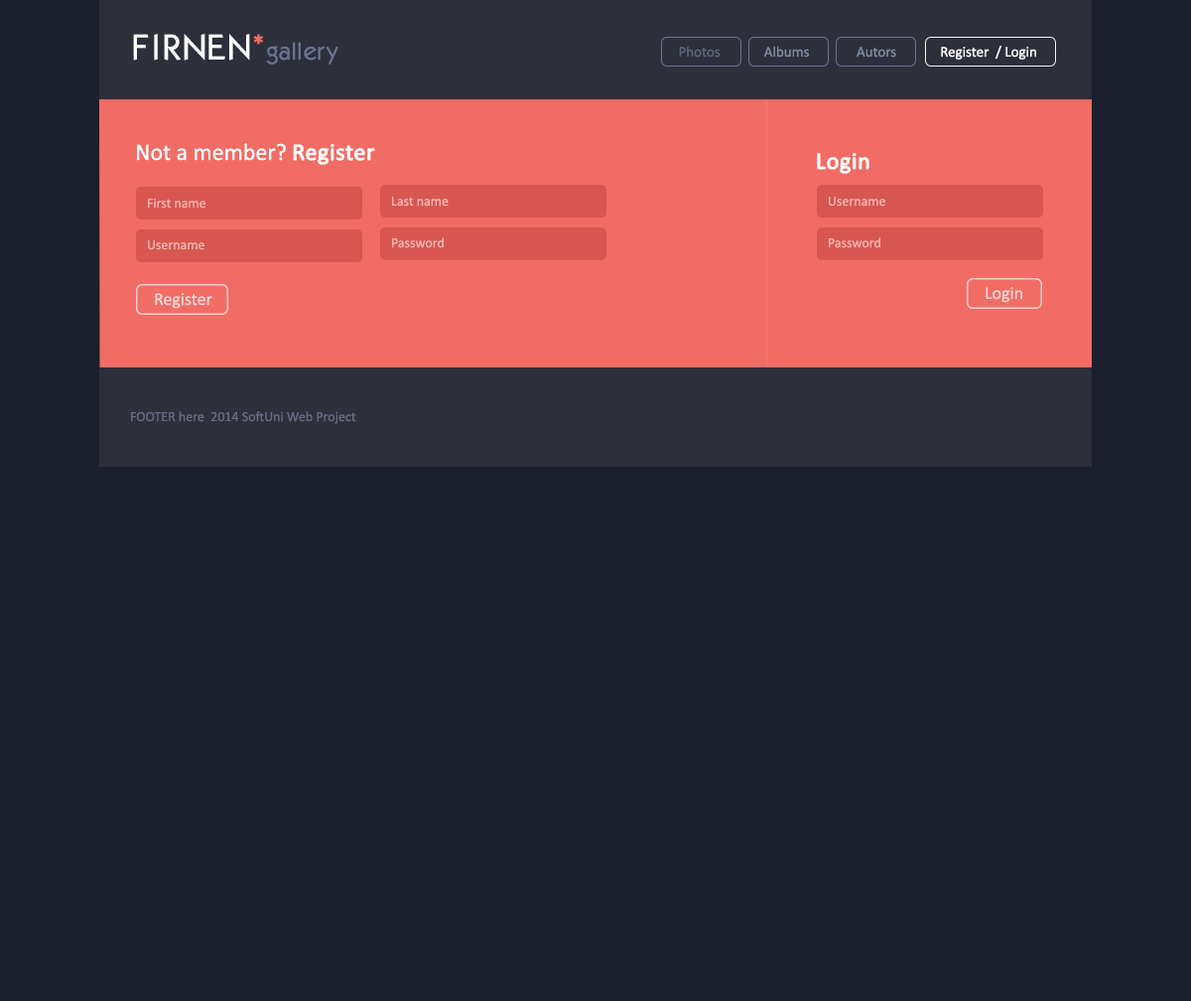
<style>
.page{position:relative;width:1191px;height:1001px;background:#1b1f2e}
.page>*{position:absolute;margin:0}
.t1{font:23.8px "Kabel";letter-spacing:0.05em;color:#6a738f}
.t2{font:35.7px "Kabel";letter-spacing:0.05em;color:#ffffff}
.t3{font:35.7px "Kabel";letter-spacing:0.075em;color:#ffffff}
.t4{font:35.7px "Kabel";letter-spacing:0.01em;color:#ffffff}
.t5{font:35.7px "Kabel";letter-spacing:0.025em;color:#ffffff}
.t6{font:35.7px "Kabel";color:#ffffff}
.t7{font:35.7px "Kabel";color:#f16c65}
.t8{font:23.8px "Kabel";color:#6a738f}
.t9{font:23.8px "Kabel";letter-spacing:-0.01em;color:#6a738f}
.t10{font:14.9px "Calibri";color:#8088a3}
.t11{font:14.9px "Calibri";color:#5d657e}
.t12{font:14.9px "Calibri";color:#ffffff}
.t13{font:23.8px "Calibri";color:#ffffff}
.t14{font:23.8px "Calibri";color:#ffffff;font-weight:bold}
.t15{font:13.9px "Calibri";color:#fab4b0}
.t16{font:17.9px "Calibri";color:#fbd8d7}
.t17{font:13.9px "Calibri";color:#676b80}
</style>
<div class="page">
<p class="t1" style="left:133px;top:34px;width:206px;height:31px"><span class="t2">F</span><span class="t3">I</span><span class="t4">R</span><span class="t5">NE</span><span class="t6">N</span><span class="t7">*</span><span class="t8">g</span>all<span class="t9">e</span><span class="t8">ry</span></p>
<p class="t10" style="left:679px;top:46px;width:358px;height:14px"><span class="t11">Photos             </span>Albums              Autors             <span class="t12">Register  / Login</span></p>
<p class="t13" style="left:137px;top:143px;width:238px;height:22px">Not a member? <span class="t14">Register</span></p>
<p class="t14" style="left:817px;top:153px;width:53px;height:21px">Login</p>
<p class="t15" style="left:148px;top:198px;width:59px;height:11px">First name</p>
<p class="t15" style="left:392px;top:197px;width:57px;height:10px">Last name</p>
<p class="t15" style="left:829px;top:197px;width:57px;height:10px">Username</p>
<p class="t15" style="left:148px;top:240px;width:57px;height:10px">Username</p>
<p class="t15" style="left:392px;top:237px;width:52px;height:11px">Password</p>
<p class="t15" style="left:829px;top:237px;width:52px;height:11px">Password</p>
<p class="t16" style="left:155px;top:293px;width:57px;height:16px">Register</p>
<p class="t16" style="left:986px;top:287px;width:37px;height:16px">Login</p>
<p class="t17" style="left:131px;top:411px;width:225px;height:13px">FOOTER here  2014 SoftUni Web Project</p>
</div>
